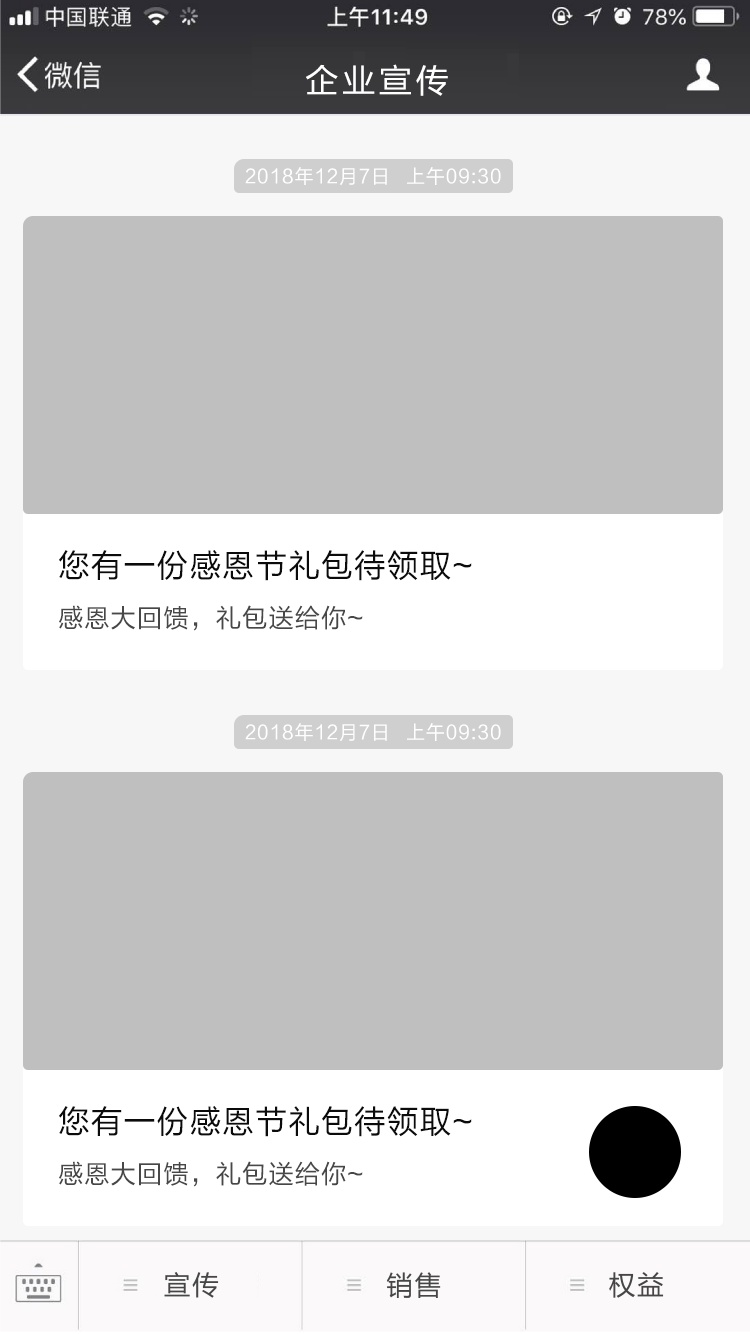
<style>
.page{position:relative;width:750px;height:1334px;background:#bfbfbf}
.page>*{position:absolute;margin:0}
.t1{font:33.3px "FZLTHK--GBK1-0";letter-spacing:0.1em;color:#ffffff}
.t2{font:19px "FZLTHK--GBK1-0";letter-spacing:0.06em;color:#ffffff}
.t3{font:32.3px "FZLTHK--GBK1-0";letter-spacing:0.04em;color:#0b0b0b}
.t4{font:25.8px "FZLTHK--GBK1-0";letter-spacing:0.04em;color:#474747}
</style>
<div class="page">
<p class="t1" style="left:306px;top:64px;width:142px;height:32px">企业宣传</p>
<p class="t2" style="left:245px;top:167px;width:256px;height:19px">2018年12月7日  上午09:30</p>
<p class="t3" style="left:59px;top:550px;width:413px;height:31px">您有一份感恩节礼包待领取~</p>
<p class="t4" style="left:59px;top:605px;width:304px;height:26px">感恩大回馈，礼包送给你~</p>
<p class="t2" style="left:245px;top:723px;width:256px;height:19px">2018年12月7日  上午09:30</p>
<p class="t3" style="left:59px;top:1106px;width:413px;height:31px">您有一份感恩节礼包待领取~</p>
<p class="t4" style="left:59px;top:1161px;width:304px;height:26px">感恩大回馈，礼包送给你~</p>
</div>
